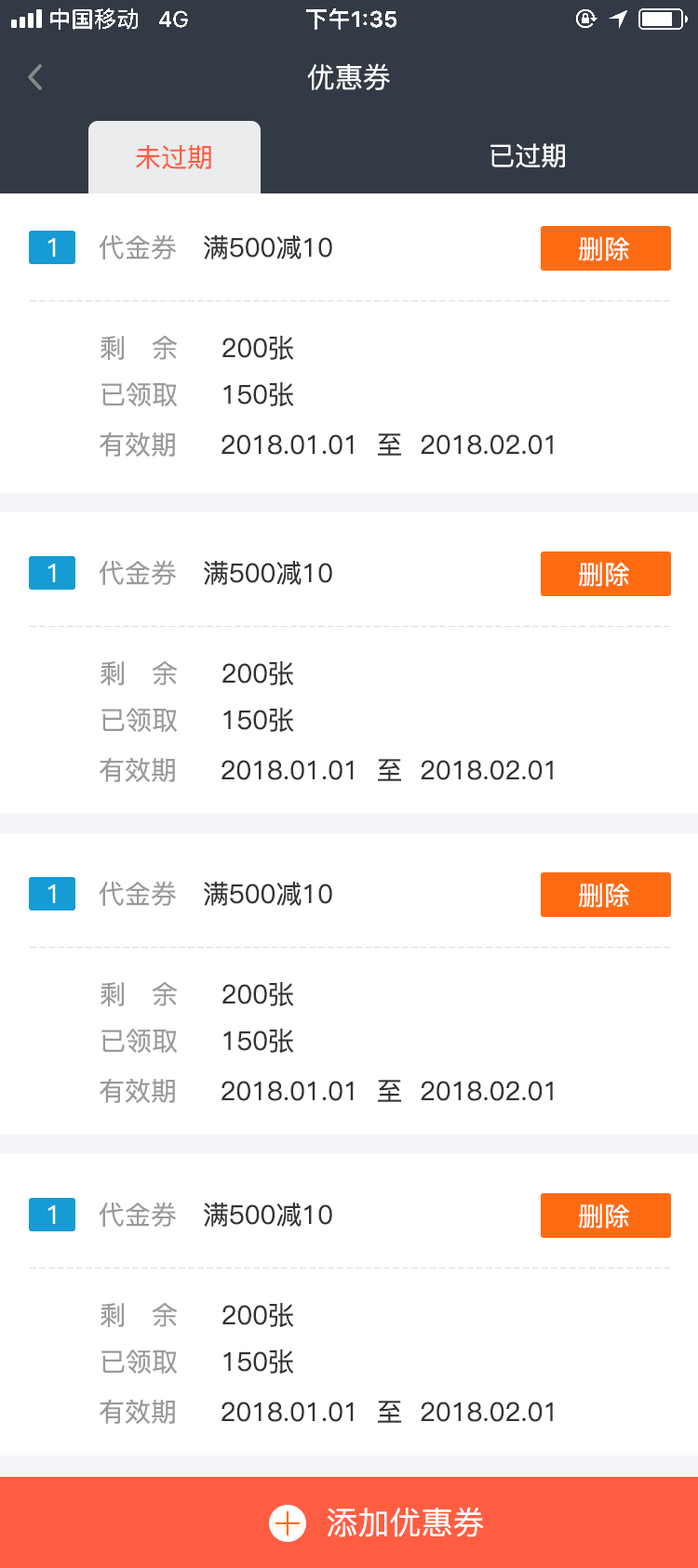
<style>
.page{position:relative;width:698px;height:1568px;background:#ffffff}
.page>*{position:absolute;margin:0}
.t1{font:27.9px "PingFang-SC-Medium";color:#ffffff}
.t2{font:26px "PingFang-SC-Medium";color:#ff5d42}
.t3{font:26px "PingFang-SC-Medium";color:#ffffff}
.t4{font:26px "PingFangSC-Regular";color:#ffffff}
.t5{font:26px "PingFang-SC-Medium";color:#333333}
.t6{font:26px "PingFang-SC-Medium";color:#999999}
.t7{font:26px/46.5px "PingFang-SC-Medium";color:#999999}
.t8{font:26px/46.5px "PingFang-SC-Medium";color:#333333}
.t9{font:31.6px "PingFang-SC-Medium";color:#ffffff}
</style>
<div class="page">
<p class="t1" style="left:307px;top:63px;width:83px;height:27px">优惠券</p>
<p class="t2" style="left:136px;top:145px;width:75px;height:24px">未过期</p>
<p class="t3" style="left:490px;top:143px;width:75px;height:25px">已过期</p>
<p class="t4" style="left:48px;top:238px;width:8px;height:19px">1</p>
<p class="t5" style="left:99px;top:234px;width:233px;height:25px"><span class="t6">代金券   </span>满500减10</p>
<p class="t3" style="left:578px;top:236px;width:52px;height:25px">删除</p>
<p class="t7" style="left:100px;top:336px;width:194px;height:70px"><span class="t6">     <br></span>剩   余     <span class="t8">200张<br></span><span class="t6">已领取     </span><span class="t8">150张</span></p>
<p class="t5" style="left:100px;top:432px;width:452px;height:25px"><span class="t6">有效期     </span>2018.01.01  至  2018.02.01</p>
<p class="t4" style="left:48px;top:564px;width:8px;height:18px">1</p>
<p class="t5" style="left:99px;top:560px;width:233px;height:25px"><span class="t6">代金券   </span>满500减10</p>
<p class="t3" style="left:578px;top:562px;width:52px;height:25px">删除</p>
<p class="t7" style="left:100px;top:661px;width:194px;height:71px"><span class="t6">     <br></span>剩   余     <span class="t8">200张<br></span><span class="t6">已领取     </span><span class="t8">150张</span></p>
<p class="t5" style="left:100px;top:757px;width:452px;height:25px"><span class="t6">有效期     </span>2018.01.01  至  2018.02.01</p>
<p class="t5" style="left:99px;top:881px;width:233px;height:25px"><span class="t6">代金券   </span>满500减10</p>
<p class="t4" style="left:48px;top:884px;width:8px;height:19px">1</p>
<p class="t3" style="left:578px;top:883px;width:52px;height:25px">删除</p>
<p class="t7" style="left:100px;top:982px;width:194px;height:71px"><span class="t6">     <br></span>剩   余     <span class="t8">200张<br></span><span class="t6">已领取     </span><span class="t8">150张</span></p>
<p class="t5" style="left:100px;top:1078px;width:452px;height:25px"><span class="t6">有效期     </span>2018.01.01  至  2018.02.01</p>
<p class="t4" style="left:48px;top:1205px;width:8px;height:19px">1</p>
<p class="t5" style="left:99px;top:1202px;width:233px;height:25px"><span class="t6">代金券   </span>满500减10</p>
<p class="t3" style="left:578px;top:1203px;width:52px;height:26px">删除</p>
<p class="t7" style="left:100px;top:1303px;width:194px;height:71px"><span class="t6">     <br></span>剩   余     <span class="t8">200张<br></span><span class="t6">已领取     </span><span class="t8">150张</span></p>
<p class="t5" style="left:100px;top:1399px;width:452px;height:25px"><span class="t6">有效期     </span>2018.01.01  至  2018.02.01</p>
<p class="t9" style="left:326px;top:1507px;width:158px;height:30px">添加优惠券</p>
</div>
